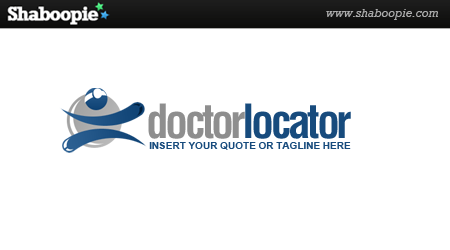
<style>
.page{position:relative;width:450px;height:250px;background:#ffffff}
.page>*{position:absolute;margin:0}
.t1{font:45.8px "Helvetica-Condensed-Bold";letter-spacing:-0.075em;color:#174b7d}
.t2{font:45.8px "Helvetica-Condensed-Bold";letter-spacing:-0.075em;color:#8e8e8e}
.t3{font:10.4px "Arial-BoldMT";letter-spacing:-0.025em;color:#174b7d}
</style>
<div class="page">
<p class="t1" style="left:148px;top:103px;width:203px;height:36px"><span class="t2">doctor</span>locator</p>
<p class="t3" style="left:149px;top:142px;width:202px;height:8px">INSERT YOUR QUOTE OR TAGLINE HERE</p>
</div>
